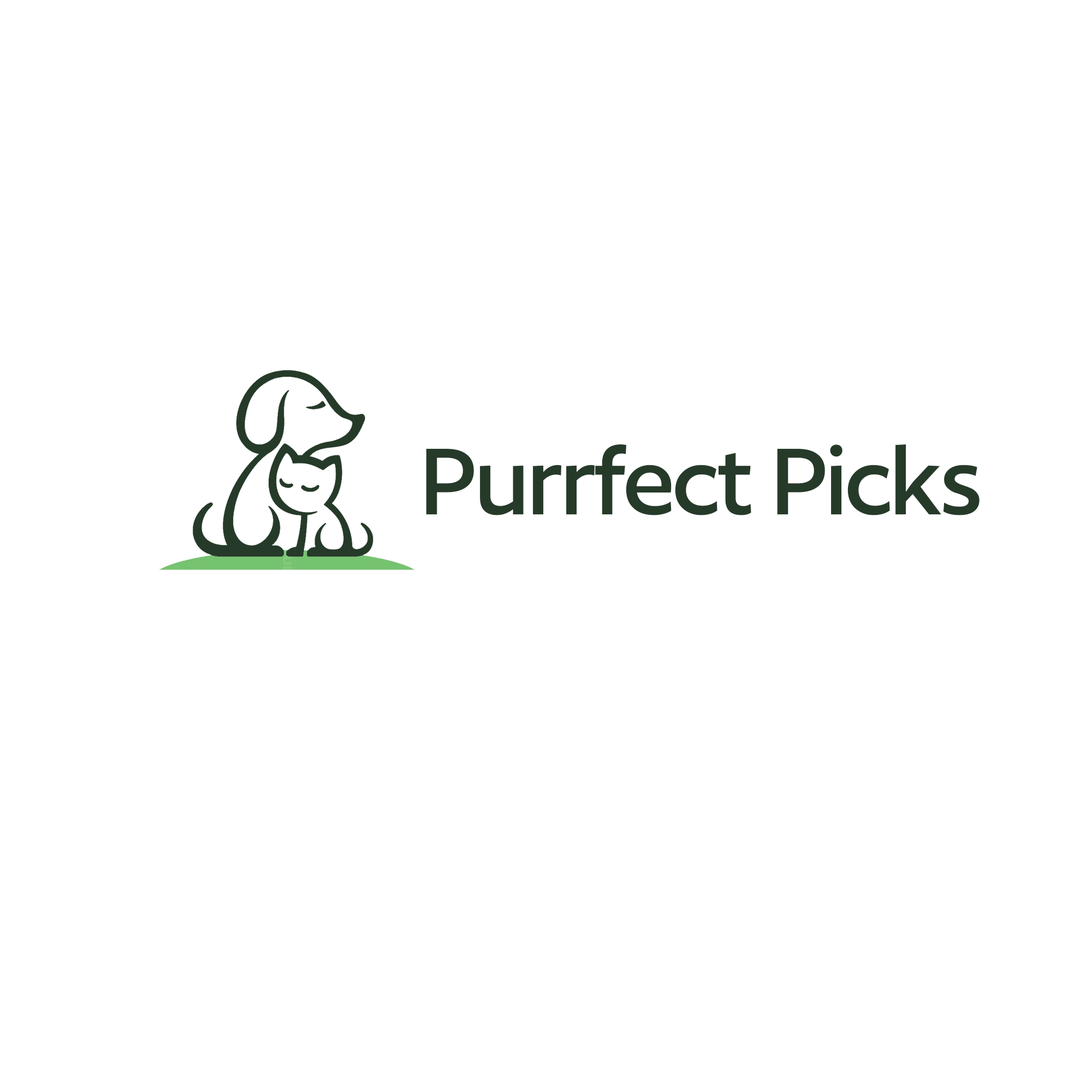
<style>
.page{position:relative;width:1092px;height:1092px;background:#ffffff}
.page>*{position:absolute;margin:0}
.t1{font:110.1px "false";letter-spacing:-0.024em;color:#263a29}
</style>
<div class="page">
<p class="t1" style="left:426px;top:444px;width:554px;height:71px">Purrfect Picks</p>
</div>
